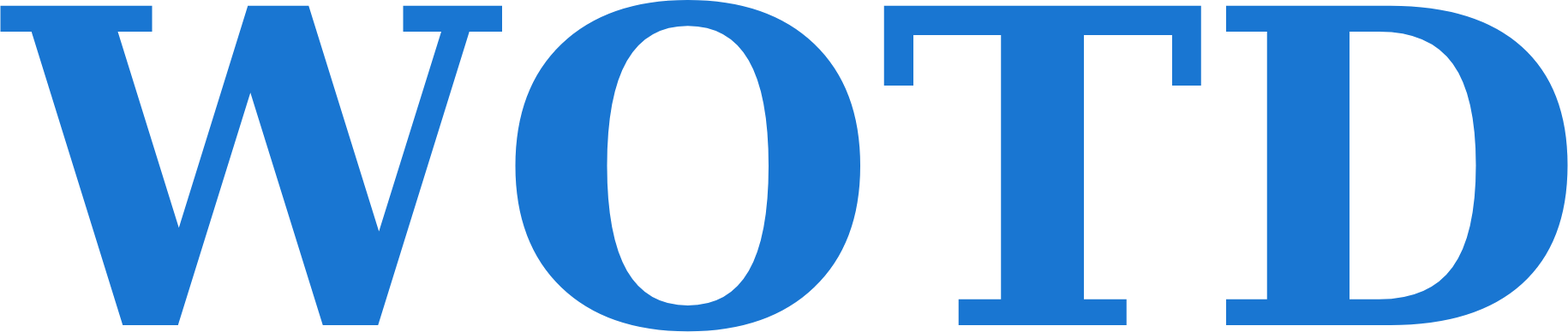
<style>
.page{position:relative;width:1568px;height:332px;background:#ffffff}
.page>*{position:absolute;margin:0}
.t1{font:438.7px "DejaVuSerif-Bold";color:#1976d2}
</style>
<div class="page">
<p class="t1" style="left:0px;top:0px;width:1568px;height:332px">WOTD</p>
</div>
